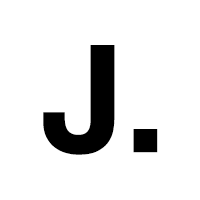
<style>
.page{position:relative;width:200px;height:200px;background:#ffffff}
.page>*{position:absolute;margin:0}
.t1{font:150px "HelveticaNeue-Bold";color:#000000}
</style>
<div class="page">
<p class="t1" style="left:43px;top:45px;width:115px;height:110px">J.</p>
</div>
